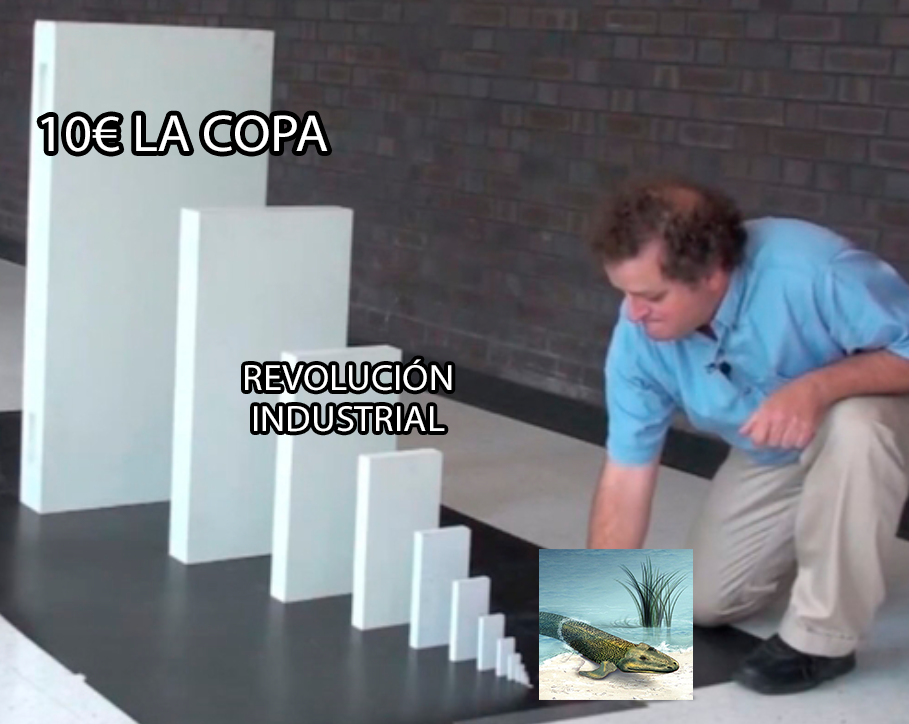
<style>
.page{position:relative;width:909px;height:724px}
.page>*{position:absolute;margin:0}
.t1{font:52.5px "MyriadPro-Regular";color:#ffffff;text-transform:uppercase;scale:1.04 1}
.t2{font:36.8px "MyriadPro-Regular";color:#ffffff;text-transform:uppercase;scale:1.04 1}
</style>
<div class="page">
<p class="t1" style="left:41px;top:115px;width:287px;height:37px">10€ la copa</p>
<p class="t2" style="left:245px;top:359px;width:207px;height:73px;text-align:center">revolución<br>industrial</p>
</div>
